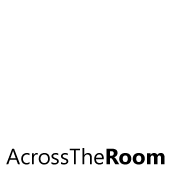
<style>
.page{position:relative;width:173px;height:173px;background:#ffffff}
.page>*{position:absolute;margin:0}
.t1{font:22px "SegoeUI";color:#000000}
.t2{font:22px "SegoeUI-Bold";color:#000000}
</style>
<div class="page">
<p class="t1" style="left:6px;top:148px;width:159px;height:17px">AcrossThe<span class="t2">Room</span></p>
</div>
